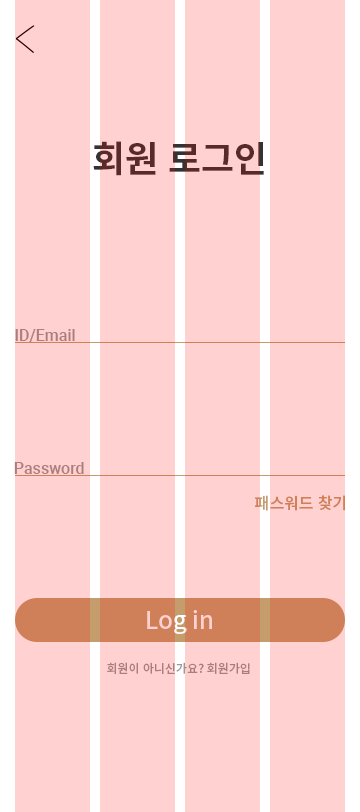
<style>
.page{position:relative;width:360px;height:812px;background:#ffd1d1}
.page>*{position:absolute;margin:0}
.t1{font:36px "NotoSansKR-Bold";color:#582a2a}
.t2{font:16px "Roboto-Medium";color:#ab7d7d}
.t3{font:16px "NotoSansKR-Medium";color:#cf8059}
.t4{font:24px "NotoSansKR-Medium";color:#ffd1d1}
.t5{font:12px "NotoSansKR-Medium";color:#ab7d7d}
</style>
<div class="page">
<p class="t1" style="left:93px;top:141px;width:171px;height:35px">회원 로그인</p>
<p class="t2" style="left:15px;top:329px;width:60px;height:13px">ID/Email</p>
<p class="t2" style="left:14px;top:462px;width:70px;height:12px">Password</p>
<p class="t3" style="left:254px;top:495px;width:91px;height:16px">패스워드 찾기</p>
<p class="t4" style="left:147px;top:610px;width:65px;height:24px">Log in</p>
<p class="t5" style="left:107px;top:662px;width:143px;height:12px">회원이 아니신가요? 회원가입</p>
</div>
